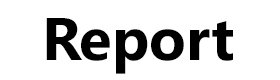
<style>
.page{position:relative;width:280px;height:80px;background:#ffffff}
.page>*{position:absolute;margin:0}
.t1{font:60px "SegoeUI-Bold";color:#000000}
</style>
<div class="page">
<p class="t1" style="left:46px;top:18px;width:187px;height:56px">Report</p>
</div>
